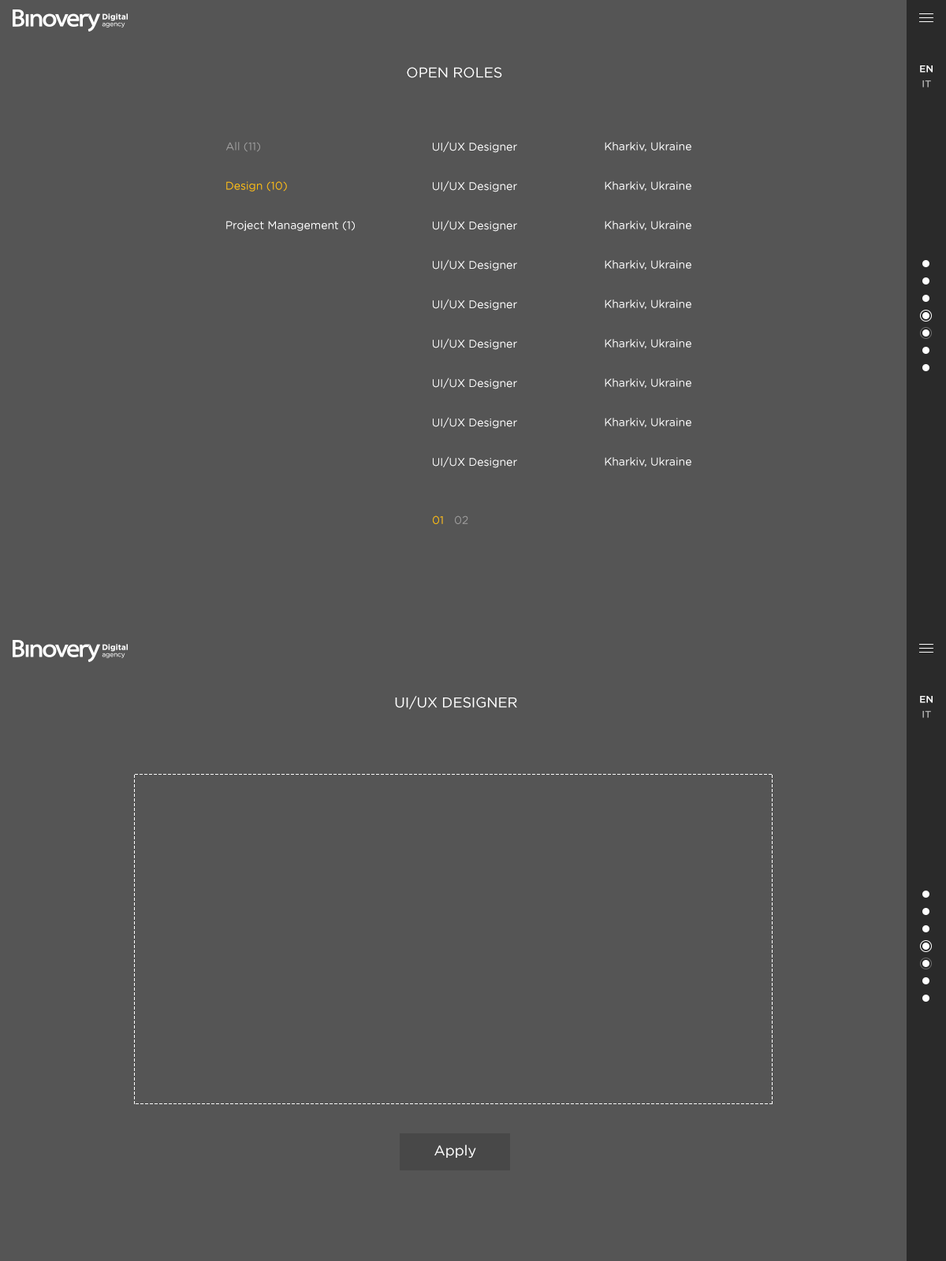
<style>
.page{position:relative;width:946px;height:1261px;background:#555555}
.page>*{position:absolute;margin:0}
.t1{font:9.5px "GothamPro-Medium";color:#ffffff}
.t2{font:14.2px "GothamPro";color:#ffffff}
.t3{font:9.5px "GothamPro-Medium";color:#a9a9a9}
.t4{font:11px "GothamPro";color:#a09f9f}
.t5{font:11px "GothamPro";color:#ffffff}
.t6{font:11px "GothamPro";color:#ffc000}
</style>
<div class="page">
<p class="t1" style="left:920px;top:65px;width:12px;height:8px">EN</p>
<p class="t2" style="left:407px;top:67px;width:95px;height:11px">OPEN ROLES</p>
<p class="t3" style="left:922px;top:80px;width:9px;height:7px">IT</p>
<p class="t4" style="left:225px;top:142px;width:35px;height:10px">All (11)</p>
<p class="t5" style="left:433px;top:141px;width:84px;height:12px">UI/UX Designer</p>
<p class="t5" style="left:604px;top:142px;width:87px;height:10px">Kharkiv, Ukraine</p>
<p class="t6" style="left:226px;top:181px;width:61px;height:11px">Design (10)</p>
<p class="t5" style="left:433px;top:180px;width:84px;height:12px">UI/UX Designer</p>
<p class="t5" style="left:604px;top:181px;width:87px;height:11px">Kharkiv, Ukraine</p>
<p class="t5" style="left:226px;top:221px;width:129px;height:10px">Project Management (1)</p>
<p class="t5" style="left:433px;top:220px;width:84px;height:12px">UI/UX Designer</p>
<p class="t5" style="left:604px;top:221px;width:87px;height:10px">Kharkiv, Ukraine</p>
<p class="t5" style="left:433px;top:259px;width:84px;height:12px">UI/UX Designer</p>
<p class="t5" style="left:604px;top:260px;width:87px;height:10px">Kharkiv, Ukraine</p>
<p class="t5" style="left:433px;top:299px;width:84px;height:12px">UI/UX Designer</p>
<p class="t5" style="left:604px;top:299px;width:87px;height:11px">Kharkiv, Ukraine</p>
<p class="t5" style="left:433px;top:338px;width:84px;height:12px">UI/UX Designer</p>
<p class="t5" style="left:604px;top:339px;width:87px;height:10px">Kharkiv, Ukraine</p>
<p class="t5" style="left:433px;top:377px;width:84px;height:12px">UI/UX Designer</p>
<p class="t5" style="left:604px;top:378px;width:87px;height:11px">Kharkiv, Ukraine</p>
<p class="t5" style="left:433px;top:417px;width:84px;height:12px">UI/UX Designer</p>
<p class="t5" style="left:604px;top:418px;width:87px;height:10px">Kharkiv, Ukraine</p>
<p class="t5" style="left:433px;top:456px;width:84px;height:12px">UI/UX Designer</p>
<p class="t5" style="left:604px;top:457px;width:87px;height:10px">Kharkiv, Ukraine</p>
<p class="t6" style="left:433px;top:515px;width:10px;height:9px">01</p>
<p class="t4" style="left:455px;top:515px;width:13px;height:9px">02</p>
<p class="t2" style="left:395px;top:696px;width:122px;height:13px">UI/UX DESIGNER</p>
<p class="t1" style="left:920px;top:696px;width:12px;height:7px">EN</p>
<p class="t3" style="left:922px;top:711px;width:9px;height:7px">IT</p>
<p class="t2" style="left:434px;top:1144px;width:42px;height:14px">Apply</p>
</div>
